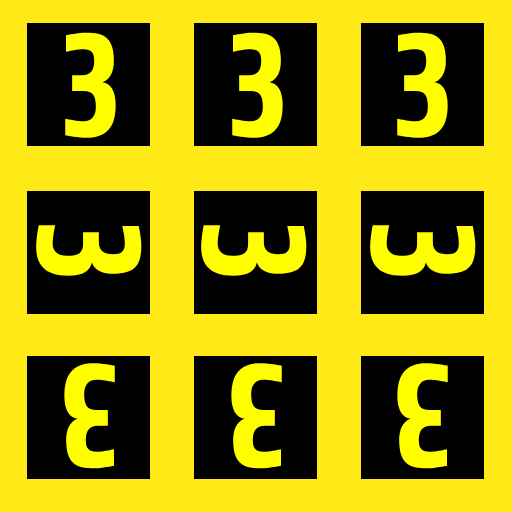
<style>
.page{position:relative;width:512px;height:512px;background:#ffea17}
.page>*{position:absolute;margin:0}
.t1{font:150px "Share-BoldOSF";color:#ffff00}
</style>
<div class="page">
<p class="t1" style="left:65px;top:32px;width:51px;height:106px">3</p>
<p class="t1" style="left:232px;top:32px;width:51px;height:106px">3</p>
<p class="t1" style="left:397px;top:32px;width:51px;height:106px">3</p>
<p class="t1" style="left:36px;top:225px;width:106px;height:51px;rotate:90deg">3</p>
<p class="t1" style="left:201px;top:225px;width:106px;height:51px;rotate:90deg">3</p>
<p class="t1" style="left:370px;top:225px;width:106px;height:51px;rotate:90deg">3</p>
<p class="t1" style="left:64px;top:363px;width:51px;height:106px;rotate:-180deg">3</p>
<p class="t1" style="left:231px;top:363px;width:51px;height:106px;rotate:-180deg">3</p>
<p class="t1" style="left:397px;top:363px;width:51px;height:106px;rotate:-180deg">3</p>
</div>
